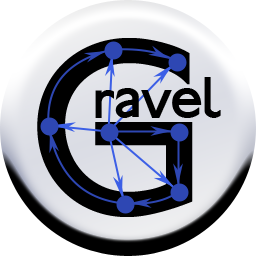
<style>
.page{position:relative;width:256px;height:256px;background:#ffffff}
.page>*{position:absolute;margin:0}
.t1{font:64px "PaddingtonPlain";color:#000000}
</style>
<div class="page">
<p class="t1" style="left:95px;top:77px;width:126px;height:41px">ravel</p>
</div>
